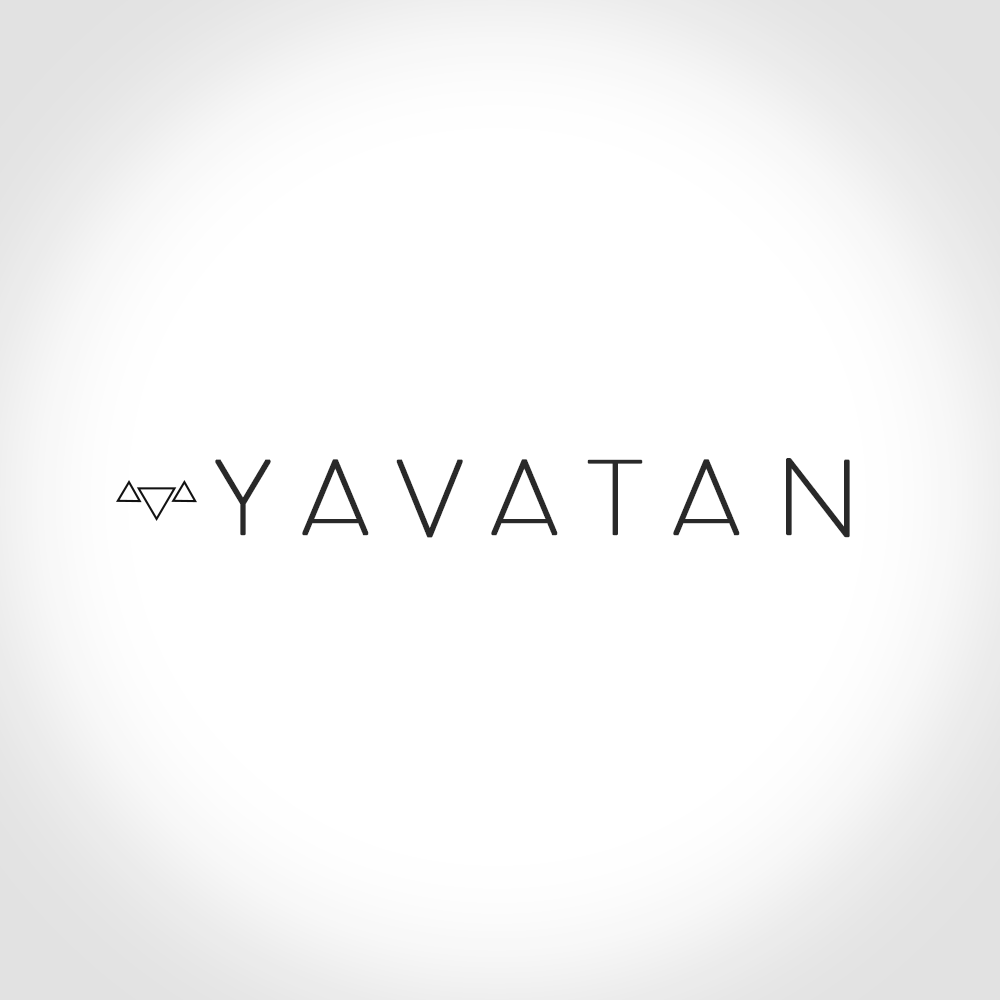
<style>
.page{position:relative;width:1000px;height:1000px;background:#ffffff}
.page>*{position:absolute;margin:0}
.t1{font:100px "COCOMAT-UltraLight";letter-spacing:0.35em;color:#292929;font-weight:bold}
</style>
<div class="page">
<p class="t1" style="left:215px;top:458px;width:635px;height:80px">YAVATAN</p>
</div>
